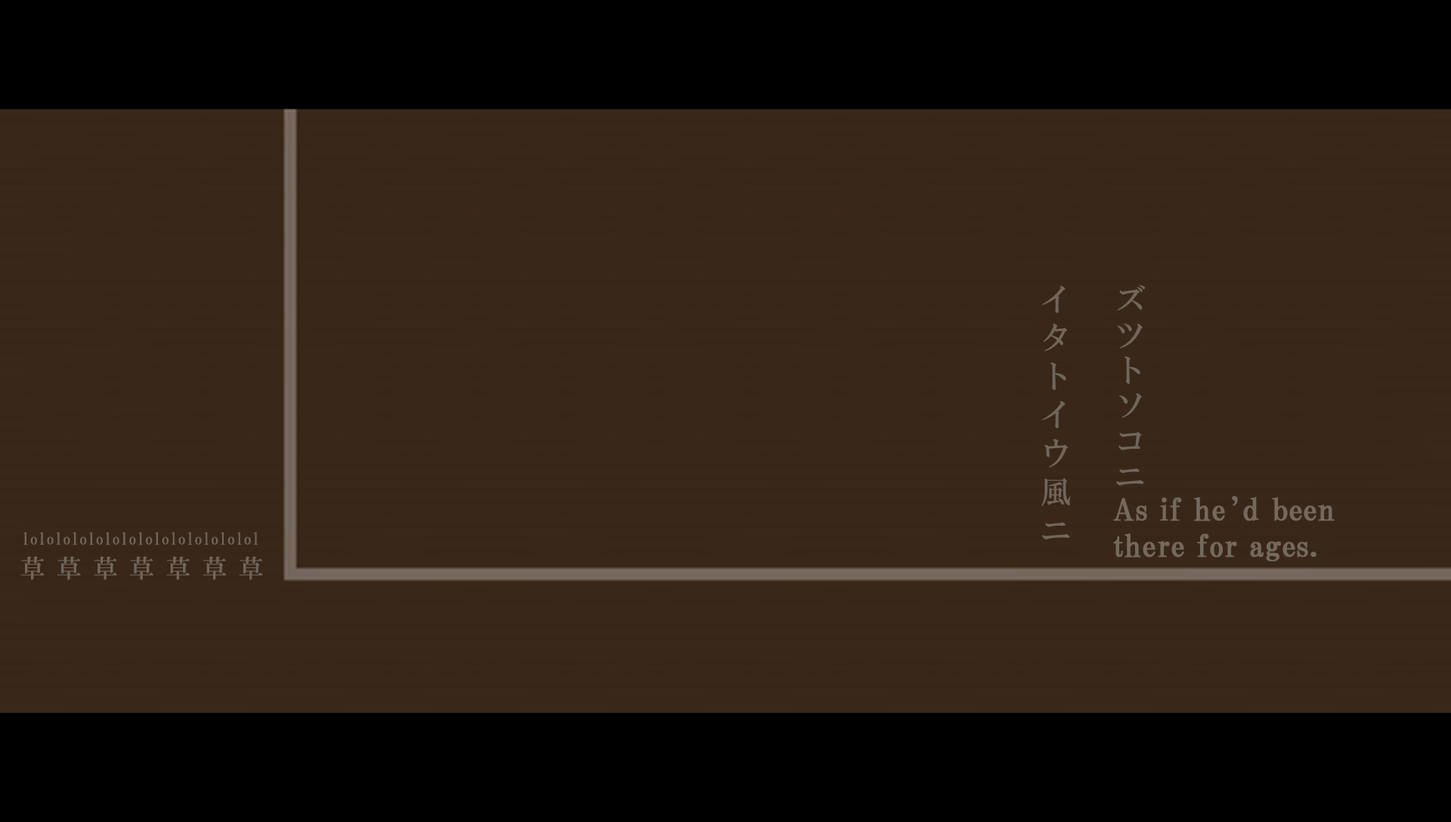
<style>
.page{position:relative;width:1451px;height:822px;background:#382719}
.page>*{position:absolute;margin:0}
.t1{font:31px/74px "HGMinchoB";letter-spacing:0.24em;color:#72665b}
.t2{font:31px/74px "HGMinchoB";letter-spacing:0.14em;color:#72665b}
.t3{font:30.2px "HGPMinchoB";letter-spacing:0.01em;color:#75695d;font-weight:bold}
.t4{font:16.1px "HGMinchoB";letter-spacing:0.01em;color:#72665b}
.t5{font:24.9px "HGMinchoB";letter-spacing:0.46em;color:#72665b}
</style>
<div class="page">
<p class="t1" style="left:1041px;top:285px;width:104px;height:254px"><span class="t2">ズツトソコニ<br></span>イタトイウ風ニ</p>
<p class="t3" style="left:1113px;top:496px;width:221px;height:65px">As if he’d been<br>there for ages.</p>
<p class="t4" style="left:23px;top:532px;width:235px;height:13px">lolololololololololololololol</p>
<p class="t5" style="left:20px;top:556px;width:243px;height:24px">草草草草草草草</p>
</div>
